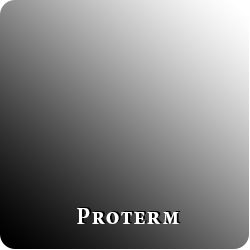
<style>
.page{position:relative;width:250px;height:250px}
.page>*{position:absolute;margin:0}
.t1{font:24px "MinionPro-BoldCnCapt";letter-spacing:0.05em;color:#fffdfd;font-variant:small-caps}
</style>
<div class="page">
<p class="t1" style="left:77px;top:208px;width:102px;height:16px">Proterm</p>
</div>
